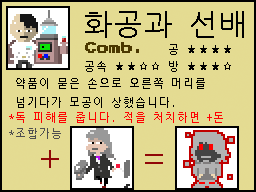
<style>
.page{position:relative;width:256px;height:192px;background:#e4db92}
.page>*{position:absolute;margin:0}
.t1{font:30px "NanumGothicCoding";color:#000000}
.t2{font:12px "PressStart2P";color:#4b3800}
.t3{font:11px "NanumGothicCoding";color:#000000}
.t4{font:11px "NanumGothicCoding";color:#ff0000}
.t5{font:11px "NanumGothicCoding";color:#4f4f4f}
.t6{font:36px "NanumGothicCoding";color:#900707}
</style>
<div class="page">
<p class="t1" style="left:85px;top:11px;width:159px;height:27px">화공과 선배</p>
<p class="t2" style="left:85px;top:42px;width:54px;height:11px">Comb.</p>
<p class="t3" style="left:169px;top:44px;width:62px;height:11px">공 ★★★★</p>
<p class="t3" style="left:85px;top:61px;width:146px;height:11px">공속 ★★☆☆ 방 ★★★☆</p>
<p class="t3" style="left:16px;top:78px;width:189px;height:30px">약품이 묻은 손으로 오른쪽 머리를 <br>넘기다가 모공이 상했습니다.</p>
<p class="t4" style="left:9px;top:112px;width:214px;height:11px">*독 피해를 줍니다. 적을 처치하면 +돈</p>
<p class="t5" style="left:9px;top:128px;width:52px;height:11px">*조합가능</p>
<p class="t6" style="left:41px;top:150px;width:18px;height:18px">+</p>
<p class="t6" style="left:145px;top:154px;width:18px;height:10px">=</p>
</div>
